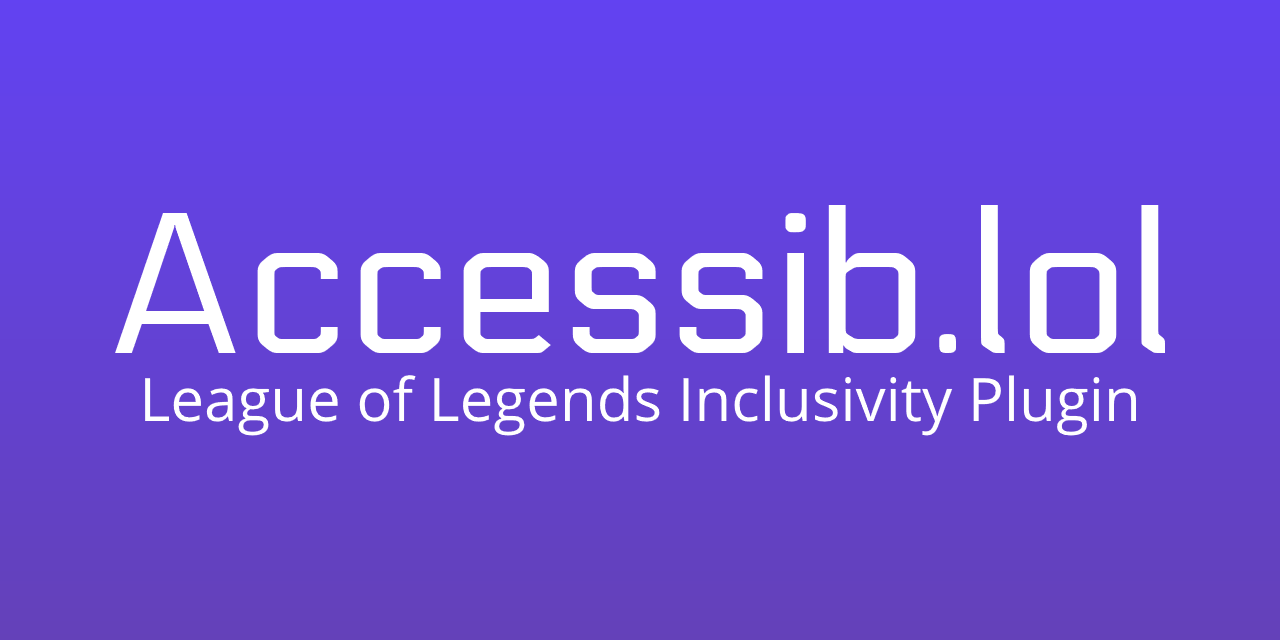
<style>
.page{position:relative;width:1280px;height:640px}
.page>*{position:absolute;margin:0}
.t1{font:200px "Electrolize-Regular";color:#ffffff}
.t2{font:60px "OpenSans-Regular";color:#ffffff}
</style>
<div class="page">
<p class="t1" style="left:115px;top:205px;width:1050px;height:148px">Accessib.lol</p>
<p class="t2" style="left:145px;top:375px;width:991px;height:61px">League of Legends Inclusivity Plugin</p>
</div>
